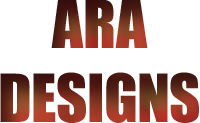
<style>
.page{position:relative;width:200px;height:123px;background:#ffffff}
.page>*{position:absolute;margin:0}
.t1{font:61.3px "Impact"}
</style>
<div class="page">
<p class="t1" style="left:0px;top:0px;width:199px;height:123px;text-align:center">ARA<br>DESIGNS</p>
</div>
